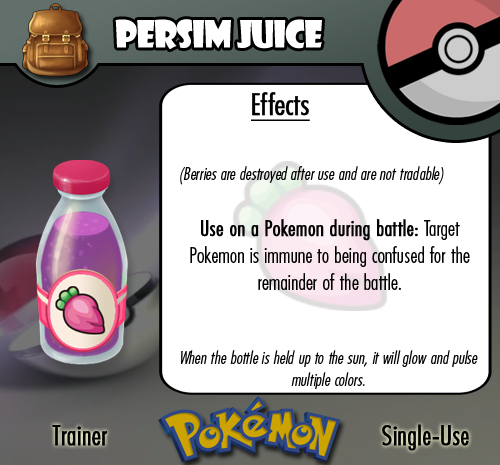
<style>
.page{position:relative;width:500px;height:465px;background:#ffffff}
.page>*{position:absolute;margin:0}
.t1{font:36.7px "ShowcardGothic-Reg";letter-spacing:-0.025em;color:#ffffff;scale:0.91 1}
.t2{font:22.2px "FuturaCondensedBQ-Light";color:#010101}
.t3{font:27.8px "FuturaCondensedBQ-Light";color:#010101;font-weight:bold}
.t4{font:30.6px "FuturaCondensedBQ-Light";color:#010101;font-weight:bold;text-decoration:underline}
.t5{font:18.1px "FuturaCondensedBQ-Light";color:#010101;font-style:italic}
.t6{font:22.2px "FuturaCondensedBQ-Light";color:#010101;font-weight:bold}
</style>
<div class="page">
<p class="t1" style="left:115px;top:19px;width:207px;height:31px">Persim Juice</p>
<p class="t2" style="left:180px;top:92px;width:290px;height:198px"><span class="t3">  </span><span class="t4">Effects<br><br><br></span><span class="t5">(Berries are destroyed after use and are not tradable)<br><br><br><br></span><span class="t6">Use on a Pokemon during battle:</span> Target Pokemon is immune to being confused for the remainder of the battle.</p>
<p class="t5" style="left:181px;top:350px;width:297px;height:39px;text-align:center">When the bottle is held up to the sun, it will glow and pulse multiple colors.</p>
<p class="t3" style="left:52px;top:425px;width:55px;height:21px">Trainer</p>
<p class="t3" style="left:382px;top:424px;width:87px;height:27px">Single-Use</p>
</div>
